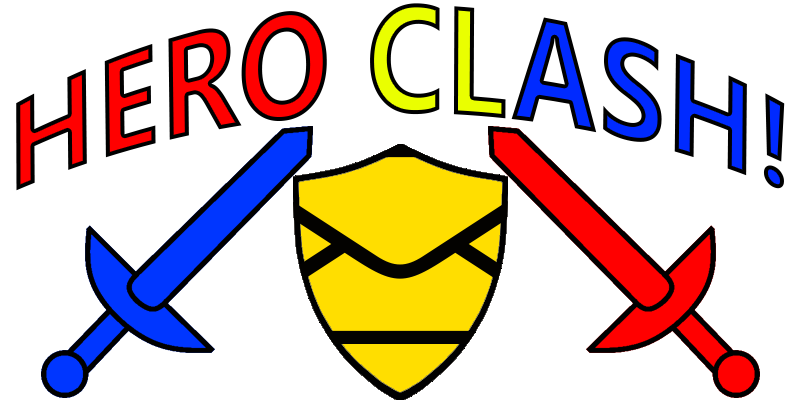
<style>
.page{position:relative;width:800px;height:400px;background:#ffffff}
.page>*{position:absolute;margin:0}
.t1{font:120.8px "NirmalaUI-Bold"}
</style>
<div class="page">
<p class="t1" style="left:16px;top:3px;width:769px;height:188px">HERO CLASH!</p>
</div>
